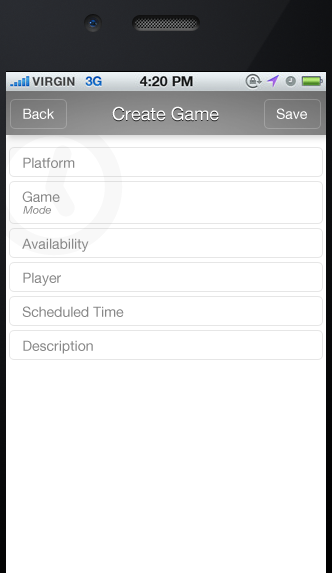
<style>
.page{position:relative;width:332px;height:573px;background:#ffffff}
.page>*{position:absolute;margin:0}
.t1{font:14px "HelveticaNeue";color:#ffffff}
.t2{font:18px "HelveticaNeue";color:#ffffff}
.t3{font:14px "HelveticaNeue";color:#888888}
.t4{font:11px "HelveticaNeue-Italic";color:#888888}
</style>
<div class="page">
<p class="t1" style="left:23px;top:108px;width:31px;height:11px">Back</p>
<p class="t2" style="left:112px;top:106px;width:107px;height:15px">Create Game</p>
<p class="t1" style="left:276px;top:108px;width:31px;height:11px">Save</p>
<p class="t3" style="left:23px;top:157px;width:52px;height:11px">Platform</p>
<p class="t3" style="left:22px;top:191px;width:38px;height:11px">Game</p>
<p class="t4" style="left:23px;top:206px;width:28px;height:8px">Mode</p>
<p class="t3" style="left:22px;top:238px;width:67px;height:14px">Availability</p>
<p class="t3" style="left:23px;top:272px;width:38px;height:14px">Player</p>
<p class="t3" style="left:22px;top:306px;width:102px;height:11px">Scheduled Time</p>
<p class="t3" style="left:23px;top:340px;width:70px;height:14px">Description</p>
</div>
